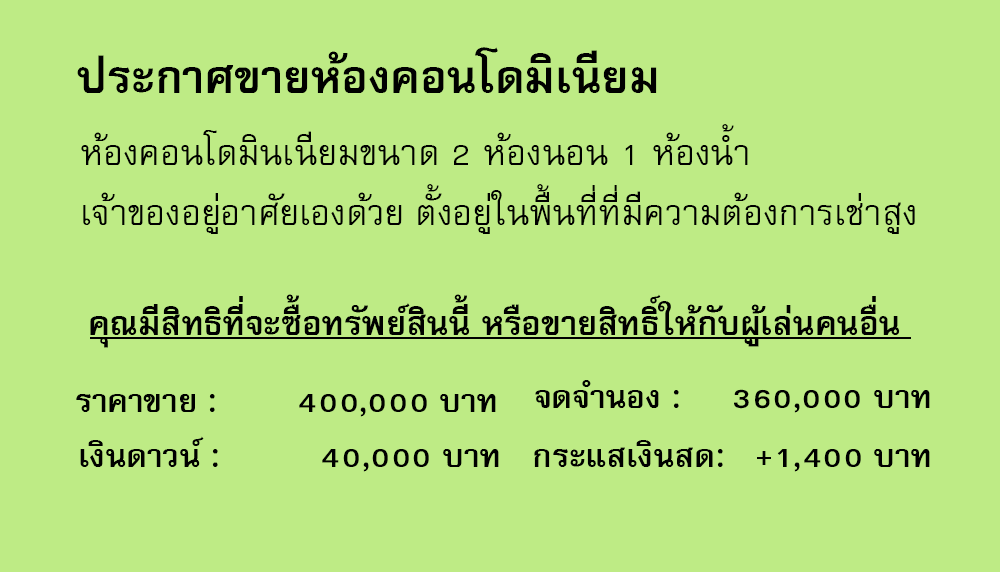
<style>
.page{position:relative;width:1000px;height:572px;background:#beeb85}
.page>*{position:absolute;margin:0}
.t1{font:64px "FreesiaUPCBold";color:#000000}
.t2{font:50px/60px "FreesiaUPC";color:#000000}
.t3{font:47px "FreesiaUPCBold";color:#000000}
.t4{font:45px "FreesiaUPCBold";color:#000000}
</style>
<div class="page">
<p class="t1" style="left:77px;top:47px;width:580px;height:46px">ประกาศขายห้องคอนโดมิเนียม</p>
<p class="t2" style="left:81px;top:124px;width:834px;height:110px">ห้องคอนโดมินเนียมขนาด 2 ห้องนอน 1 ห้องน้ำ <br>เจ้าของอยู่อาศัยเองด้วย ตั้งอยู่ในพื้นที่ที่มีความต้องการเช่าสูง</p>
<p class="t3" style="left:90px;top:294px;width:810px;height:54px">คุณมีสิทธิที่จะซื้อทรัพย์สินนี้ หรือขายสิทธิ์ให้กับผู้เล่นคนอื่น</p>
<p class="t4" style="left:535px;top:380px;width:395px;height:33px">จดจำนอง :     360,000 บาท</p>
<p class="t4" style="left:76px;top:394px;width:420px;height:23px">ราคาขาย :        400,000 บาท</p>
<p class="t4" style="left:80px;top:436px;width:419px;height:36px">เงินดาวน์ :          40,000 บาท</p>
<p class="t4" style="left:534px;top:440px;width:396px;height:32px">กระแสเงินสด:   +1,400 บาท</p>
</div>
